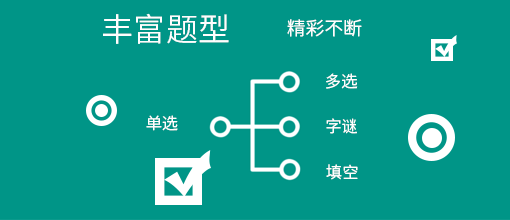
<style>
.page{position:relative;width:510px;height:220px;background:#009587}
.page>*{position:absolute;margin:0}
.t1{font:32px "SourceHanSansCN-Normal";letter-spacing:0.01em;color:#fefefe}
.t2{font:18.7px "SourceHanSansCN-Normal";letter-spacing:0.01em;color:#fefefe}
.t3{font:16px "SourceHanSansCN-Normal";letter-spacing:0.01em;color:#fefefe}
</style>
<div class="page">
<p class="t1" style="left:103px;top:13px;width:126px;height:31px">丰富题型</p>
<p class="t2" style="left:287px;top:19px;width:75px;height:18px">精彩不断</p>
<p class="t3" style="left:326px;top:73px;width:32px;height:16px">多选</p>
<p class="t3" style="left:146px;top:115px;width:32px;height:16px">单选</p>
<p class="t3" style="left:326px;top:118px;width:31px;height:16px">字谜</p>
<p class="t3" style="left:326px;top:164px;width:32px;height:16px">填空</p>
</div>
